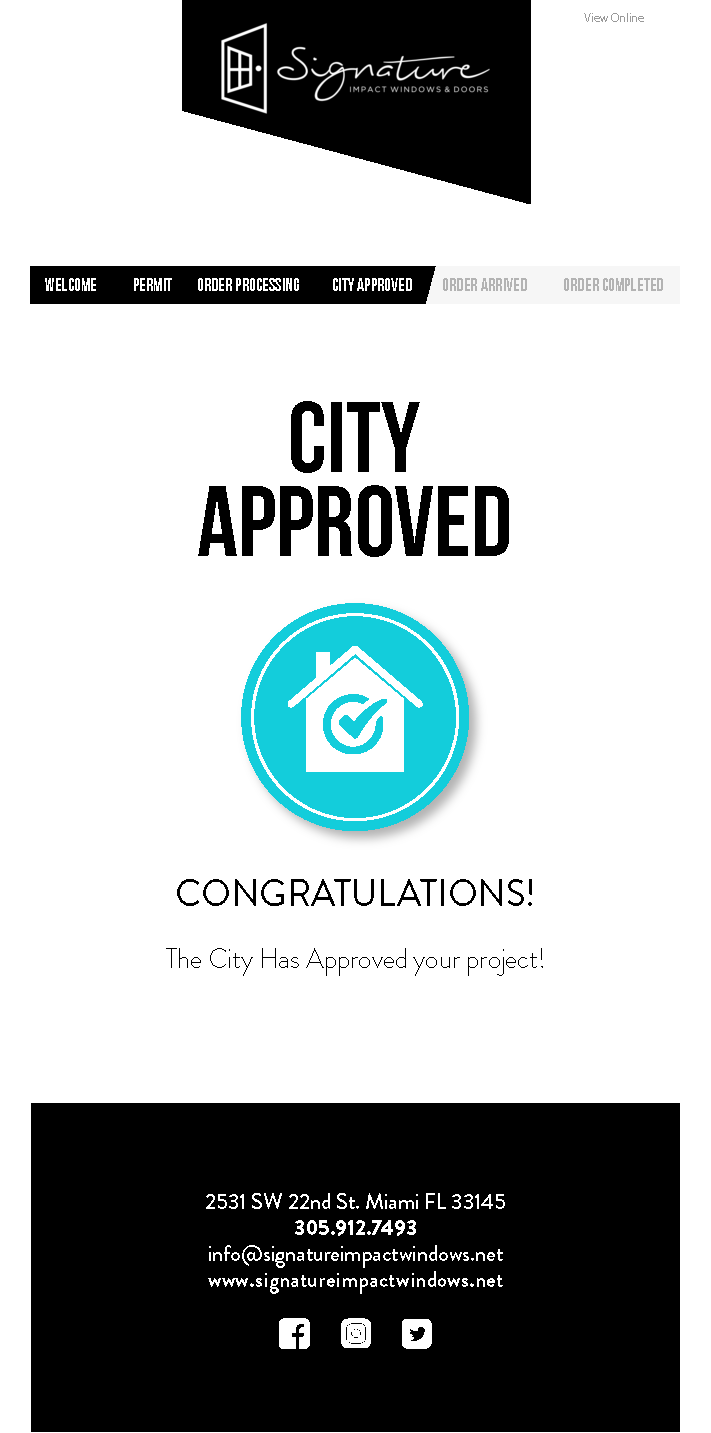
<style>
.page{position:relative;width:711px;height:1433px;background:#ffffff}
.page>*{position:absolute;margin:0}
.t1{font:12px "MyriadPro-Regular";color:#999999}
.t2{font:17.6px "BebasNeueBold";color:#ffffff}
.t3{font:17.6px "BebasNeueBold";color:#b3b3b3}
.t4{font:100px/84px "BebasNeueBold";color:#000000}
.t5{font:28px/31px "BrandonGrotesque-Light";color:#000000;scale:0.97 1}
.t6{font:38px/31px "BrandonGrotesque-Regular";color:#000000;scale:0.97 1}
.t7{font:22px/26px "BrandonGrotesque-Medium";color:#ffffff}
.t8{font:22px/26px "BrandonGrotesque-Black";color:#ffffff}
.t9{font:22px/26px "BrandonGrotesque-Bold";letter-spacing:0.015em;color:#ffffff}
</style>
<div class="page">
<p class="t1" style="left:584px;top:13px;width:60px;height:9px">View Online</p>
<p class="t2" style="left:45px;top:278px;width:618px;height:13px">WELCOME             PERMIT         ORDER PROCESSING            CITY APPROVED<span class="t3">           ORDER ARRIVED             ORDER COMPLETED</span></p>
<p class="t4" style="left:198px;top:401px;width:311px;height:156px;text-align:center">CITY<br>APPROVED</p>
<p class="t5" style="left:166px;top:879px;width:377px;height:97px;text-align:center"><span class="t6">CONGRATULATIONS!<br><br></span>The City Has Approved your project!</p>
<p class="t7" style="left:206px;top:1193px;width:299px;height:101px;text-align:center">2531 SW 22nd St. Miami FL 33145<br><span class="t8">305.912.7493<br></span>info@signatureimpactwindows.net<br><span class="t9">www.signatureimpactwindows.net</span></p>
</div>
